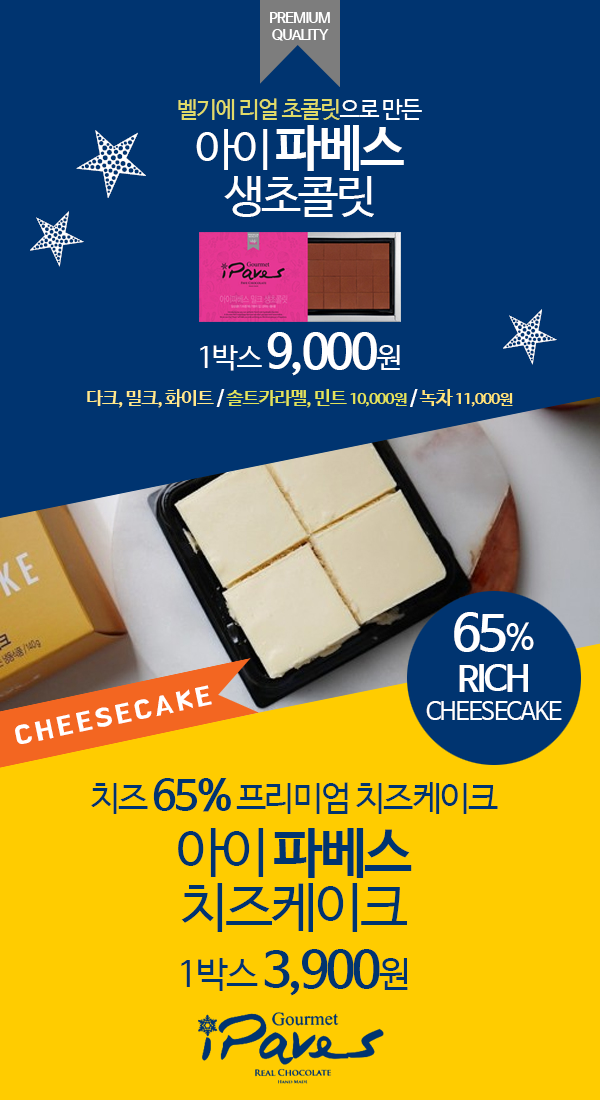
<style>
.page{position:relative;width:600px;height:1100px;background:#003470}
.page>*{position:absolute;margin:0}
.t1{font:15.1px/17.1px "NanumBarunGothicBold";letter-spacing:-0.06em;color:#ffffff}
.t2{font:23.3px/34.7px "NanumBarunGothic";letter-spacing:-0.06em;color:#e0db69}
.t3{font:23.3px/34.7px "NanumBarunGothic";letter-spacing:-0.06em;color:#ffffff}
.t4{font:44.8px/47.3px "NanumBarunGothic";letter-spacing:-0.06em;color:#ffffff}
.t5{font:50.1px/47.3px "NanumBarunGothicBold";letter-spacing:-0.06em;color:#ffffff}
.t6{font:79px "NanumMyeongjoEco";letter-spacing:-0.06em;color:#ffffff}
.t7{font:61.9px "NanumMyeongjoEco";letter-spacing:-0.06em;color:#ffffff}
.t8{font:19.1px/37px "NanumBarunGothicBold";letter-spacing:-0.06em;color:#ffe88b}
.t9{font:29px/37px "NanumBarunGothic";letter-spacing:-0.06em;color:#ffffff}
.t10{font:47.2px/37px "NanumBarunGothicBold";letter-spacing:-0.06em;color:#ffffff}
.t11{font:19.1px/37px "NanumBarunGothicBold";letter-spacing:-0.06em;color:#ffffff}
.t12{font:19.1px/37px "NanumBarunGothicBold";letter-spacing:-0.06em;color:#e2e459}
.t13{font:15.4px/37px "NanumBarunGothicBold";letter-spacing:-0.06em;color:#e2e459}
.t14{font:19.1px/37px "NanumBarunGothicBold";letter-spacing:-0.06em;color:#ffe478}
.t15{font:15.4px/37px "NanumBarunGothicBold";letter-spacing:-0.06em;color:#ffe478}
.t16{font:24px/28.8px "NanumBarunGothic";letter-spacing:-0.06em;color:#ffffff}
.t17{font:50px/40.8px "NanumBarunGothicBold";letter-spacing:-0.06em;color:#ffffff}
.t18{font:36px/40.8px "NanumBarunGothic";letter-spacing:-0.06em;color:#ffffff}
.t19{font:36px/40.8px "NanumBarunGothicBold";letter-spacing:-0.06em;color:#ffffff}
.t20{font:26.4px "BMHANNA11yrsold";letter-spacing:0.14em;color:#ffffff}
.t21{font:34px/40.8px "NanumBarunGothic";letter-spacing:-0.06em;color:#003470}
.t22{font:42px/40.8px "NanumBarunGothicBold";letter-spacing:-0.06em;color:#003470}
.t23{font:54px/60.8px "NanumBarunGothic";letter-spacing:-0.06em;color:#003470}
.t24{font:54px/60.8px "NanumBarunGothicBold";letter-spacing:-0.06em;color:#003470}
.t25{font:54px/54.8px "NanumBarunGothic";letter-spacing:-0.06em;color:#003470}
.t26{font:36px/60.8px "NanumBarunGothic";letter-spacing:-0.06em;color:#003470}
.t27{font:50px/60.8px "NanumBarunGothicBold";letter-spacing:-0.06em;color:#003470}
</style>
<div class="page">
<p class="t1" style="left:270px;top:12px;width:60px;height:29px;text-align:center">PREMIUM<br>QUALITY</p>
<p class="t2" style="left:178px;top:98px;width:244px;height:119px;text-align:center">벨기에 리얼 초콜릿<span class="t3">으로 만든<br></span><span class="t4">아이 </span><span class="t5">파베스<br></span><span class="t4">생초콜릿</span></p>
<p class="t6" style="left:76px;top:130px;width:70px;height:68px;rotate:-30deg">★</p>
<p class="t7" style="left:30px;top:211px;width:54px;height:56px;rotate:-45deg">★</p>
<p class="t7" style="left:503px;top:309px;width:54px;height:56px;rotate:-45deg">★</p>
<p class="t8" style="left:87px;top:332px;width:426px;height:76px;text-align:center"><span class="t9">1박스 </span><span class="t10">9,000</span><span class="t9">원<br></span>다크, 밀크, 화이트 <span class="t11">/ </span><span class="t12">솔트카라멜, 민트 </span><span class="t13">10,000원</span><span class="t11"> / </span><span class="t14">녹차 </span><span class="t15">11,000원</span></p>
<p class="t16" style="left:426px;top:612px;width:136px;height:108px;text-align:center"><span class="t17">65</span><span class="t18">%<br></span><span class="t19">RICH<br></span>CHEESECAKE</p>
<p class="t20" style="left:15px;top:685px;width:197px;height:59px;rotate:-12deg">CHEESECAKE</p>
<p class="t21" style="left:91px;top:778px;width:407px;height:218px;text-align:center">치즈 <span class="t22">65%</span> 프리미엄 치즈케이크<br><span class="t23">아이 </span><span class="t24">파베스<br></span><span class="t25">치즈케이크<br></span><span class="t26">1박스 </span><span class="t27">3,900</span><span class="t26">원</span></p>
</div>
